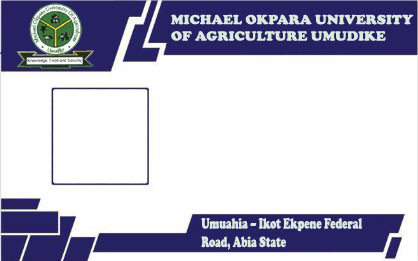
<style>
.page{position:relative;width:418px;height:261px;background:#ffffff}
.page>*{position:absolute;margin:0}
.t1{font:13.7px "CooperBlack";color:#dce9e0;scale:1.04 1}
.t2{font:15.4px "CooperBlack";color:#dce9e0;scale:0.65 1}
</style>
<div class="page">
<p class="t1" style="left:171px;top:14px;width:243px;height:27px">MICHAEL OKPARA UNIVERSITY<br>OF AGRICULTURE UMUDIKE</p>
<p class="t2" style="left:201px;top:217px;width:161px;height:33px">Umuahia – Ikot Ekpene Federal<br>Road, Abia State</p>
</div>
